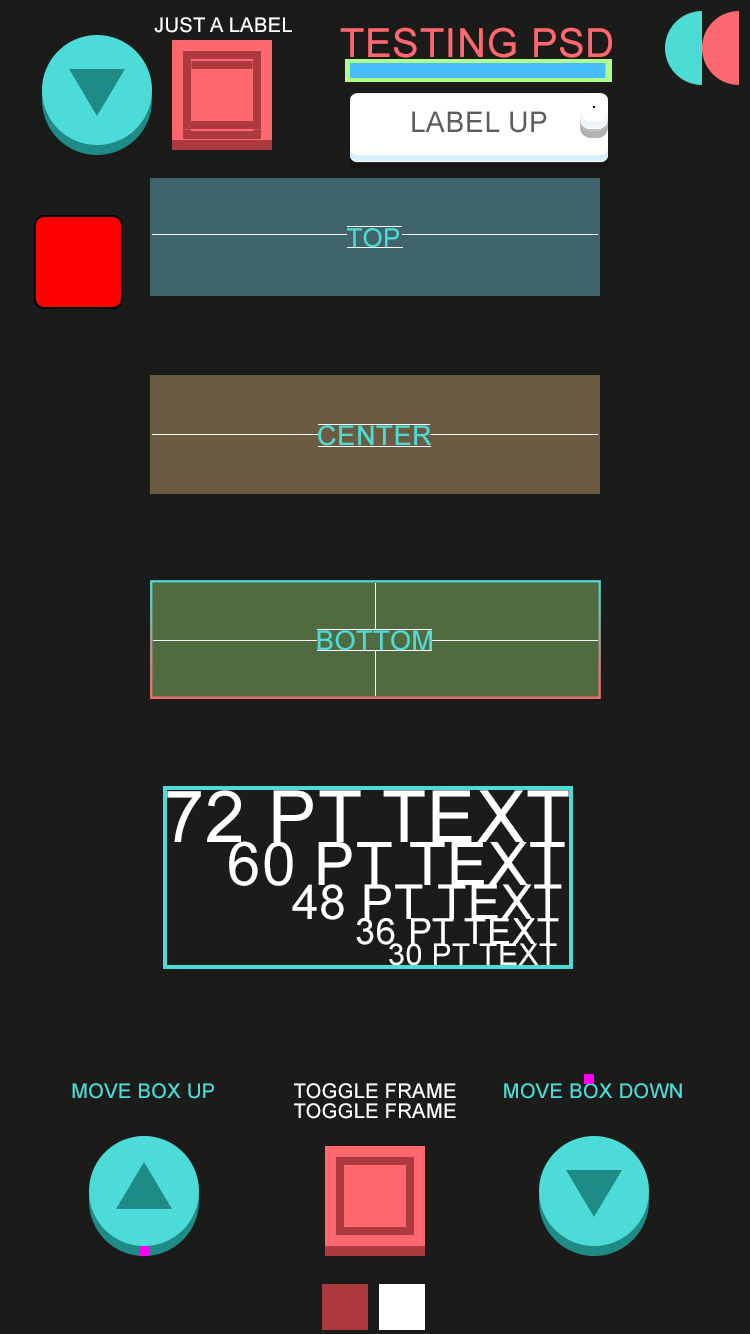
<style>
.page{position:relative;width:750px;height:1334px;background:#1b1b19}
.page>*{position:absolute;margin:0}
.t1{font:20px "ArialMT";letter-spacing:0.02em;color:#ffffff}
.t2{font:40px "ArialMT";letter-spacing:0.02em;color:#ff686f}
.t3{font:28.4px "ArialMT";letter-spacing:0.02em;color:#5a5e60}
.t4{font:26px "ArialMT";letter-spacing:0.02em;color:#4cdbd6}
.t5{font:27.2px "ArialMT";letter-spacing:0.02em;color:#4cdbd6}
.t6{font:72px "ArialMT";letter-spacing:0.02em;color:#ffffff}
.t7{font:60px "ArialMT";letter-spacing:0.02em;color:#ffffff}
.t8{font:48px "ArialMT";letter-spacing:0.02em;color:#ffffff}
.t9{font:36px "ArialMT";letter-spacing:0.02em;color:#ffffff}
.t10{font:30px "ArialMT";letter-spacing:0.02em;color:#ffffff}
.t11{font:20px "ArialMT";letter-spacing:0.02em;color:#4cdbd6}
</style>
<div class="page">
<p class="t1" style="left:154px;top:17px;width:138px;height:16px">JUST A LABEL</p>
<p class="t2" style="left:340px;top:27px;width:272px;height:31px">TESTING PSD</p>
<p class="t3" style="left:412px;top:111px;width:135px;height:22px">LABEL UP</p>
<p class="t4" style="left:347px;top:228px;width:52px;height:20px">TOP</p>
<p class="t5" style="left:318px;top:425px;width:113px;height:21px">CENTER</p>
<p class="t5" style="left:317px;top:630px;width:115px;height:21px">BOTTOM</p>
<p class="t6" style="left:167px;top:790px;width:402px;height:52px">72 PT TEXT</p>
<p class="t7" style="left:229px;top:841px;width:336px;height:45px">60 PT TEXT</p>
<p class="t8" style="left:292px;top:884px;width:270px;height:36px">48 PT TEXT</p>
<p class="t9" style="left:356px;top:918px;width:203px;height:27px">36 PT TEXT</p>
<p class="t10" style="left:389px;top:943px;width:168px;height:23px">30 PT TEXT</p>
<p class="t11" style="left:72px;top:1083px;width:142px;height:16px">MOVE BOX UP</p>
<p class="t1" style="left:294px;top:1083px;width:162px;height:16px">TOGGLE FRAME</p>
<p class="t11" style="left:504px;top:1083px;width:178px;height:16px">MOVE BOX DOWN</p>
<p class="t1" style="left:294px;top:1103px;width:162px;height:16px">TOGGLE FRAME</p>
</div>
